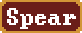
<style>
.page{position:relative;width:82px;height:33px;background:#6a1e19}
.page>*{position:absolute;margin:0}
.t1{font:30px "Windows-Command-Prompt";color:#ffffff}
</style>
<div class="page">
<p class="t1" style="left:7px;top:8px;width:69px;height:21px">Spear</p>
</div>
